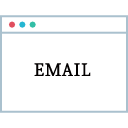
<style>
.page{position:relative;width:128px;height:128px;background:#ffffff}
.page>*{position:absolute;margin:0}
.t1{font:18.8px "Caladea-Regular";letter-spacing:0.04em;color:#030000;text-transform:uppercase}
</style>
<div class="page">
<p class="t1" style="left:34px;top:63px;width:57px;height:13px">EMAIL</p>
</div>
